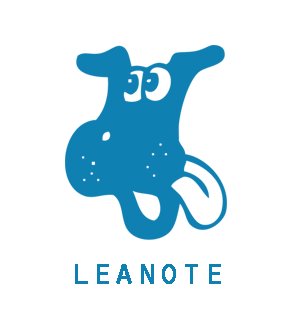
<style>
.page{position:relative;width:285px;height:312px;background:#ffffff}
.page>*{position:absolute;margin:0}
.t1{font:36px "OratorStd";color:#0f80b2;font-weight:bold}
</style>
<div class="page">
<p class="t1" style="left:75px;top:264px;width:146px;height:20px">leanote</p>
</div>
